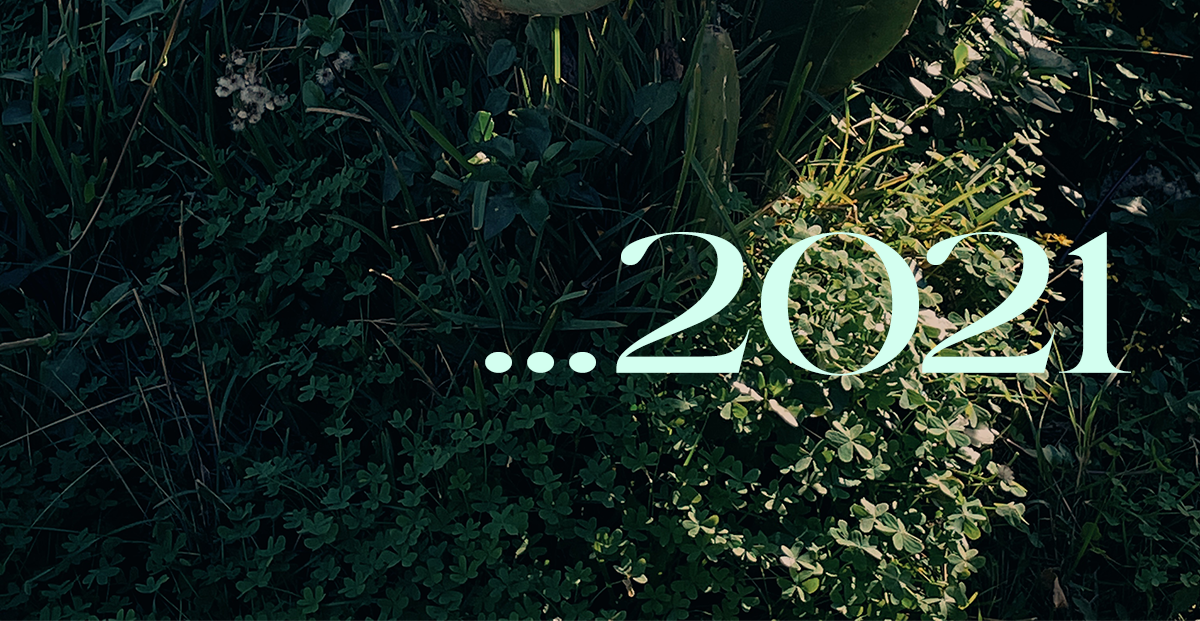
<style>
.page{position:relative;width:1200px;height:621px}
.page>*{position:absolute;margin:0}
.t1{font:200px "Richy";color:#d3fff0}
.t2{font:200px "Richy";letter-spacing:0.075em;color:#d3fff0}
</style>
<div class="page">
<p class="t1" style="left:485px;top:232px;width:646px;height:144px">..<span class="t2">.</span>2021</p>
</div>
